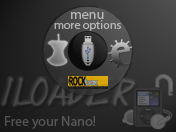
<style>
.page{position:relative;width:176px;height:132px}
.page>*{position:absolute;margin:0}
.t1{font:14px "MyriadPro-Regular";color:#b7b7b7}
.t2{font:12px "MyriadPro-Regular";color:#b5b5b5}
.t3{font:30px "Yearsupplyoffairycakes";color:#43433f}
.t4{font:14px "MyriadPro-Regular";color:#575757}
</style>
<div class="page">
<p class="t1" style="left:71px;top:12px;width:33px;height:7px">menu</p>
<p class="t2" style="left:54px;top:20px;width:67px;height:11px">more options</p>
<p class="t3" style="left:2px;top:78px;width:134px;height:29px">iLoader</p>
<p class="t4" style="left:5px;top:116px;width:91px;height:13px">Free your Nano!</p>
</div>
